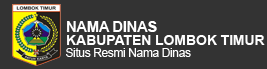
<style>
.page{position:relative;width:267px;height:69px;background:#333333}
.page>*{position:absolute;margin:0}
.t1{font:14.9px "Arial-BoldMT";letter-spacing:-0.025em;color:#ffffff}
.t2{font:14.5px "Arial-BoldMT";letter-spacing:-0.025em;color:#ffffff}
.t3{font:11.8px "ArialMT";letter-spacing:-0.025em;color:#ffffff}
</style>
<div class="page">
<p class="t1" style="left:67px;top:21px;width:90px;height:11px">NAMA DINAS</p>
<p class="t2" style="left:67px;top:35px;width:198px;height:10px">KABUPATEN LOMBOK TIMUR</p>
<p class="t3" style="left:66px;top:48px;width:125px;height:9px">Situs Resmi Nama Dinas</p>
</div>
